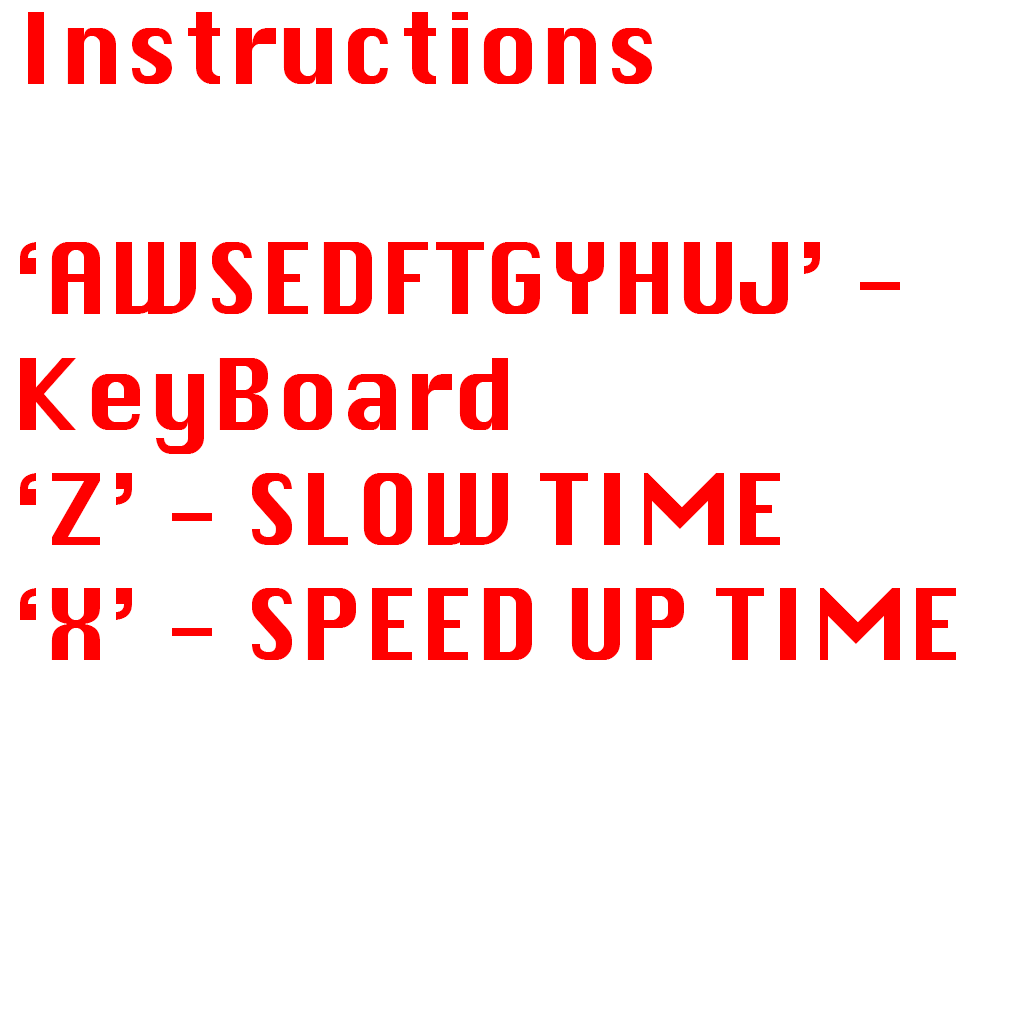
<style>
.page{position:relative;width:1024px;height:1024px;background:#ffffff}
.page>*{position:absolute;margin:0}
.t1{font:96px "Silom";color:#ff0000}
</style>
<div class="page">
<p class="t1" style="left:20px;top:12px;width:936px;height:648px">Instructions<br><br>‘AWSEDFTGYHUJ’ - KeyBoard<br>‘Z’ - SLOW TIME<br>‘X’ - SPEED UP TIME</p>
</div>
